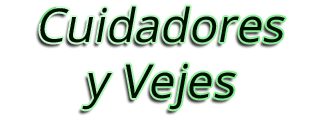
<style>
.page{position:relative;width:320px;height:121px;background:#ffffff}
.page>*{position:absolute;margin:0}
.t1{font:46.7px "OpenSans";color:#000000;font-style:italic}
</style>
<div class="page">
<p class="t1" style="left:40px;top:6px;width:245px;height:104px;text-align:center">Cuidadores <br>y Vejes</p>
</div>
